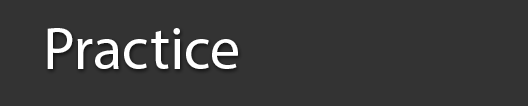
<style>
.page{position:relative;width:528px;height:106px;background:#333333}
.page>*{position:absolute;margin:0}
.t1{font:60px "MyriadPro-Regular";color:#ffffff}
</style>
<div class="page">
<p class="t1" style="left:47px;top:28px;width:191px;height:41px">Practice</p>
</div>
